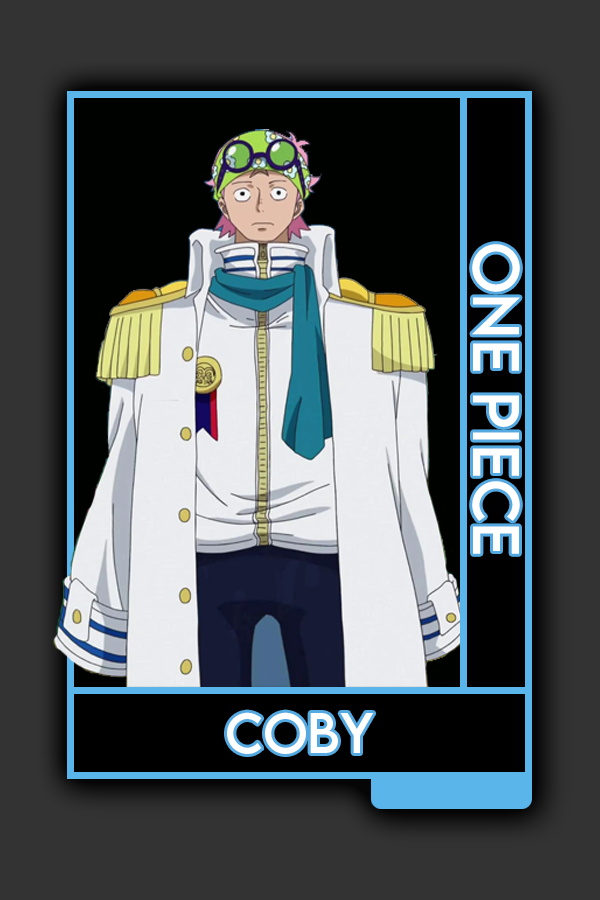
<style>
.page{position:relative;width:600px;height:900px;background:#333333}
.page>*{position:absolute;margin:0}
.t1{font:58.4px "LEMONMILK-Regular";color:#ffffff}
.t2{font:50.5px "LEMONMILK-Regular";color:#ffffff}
</style>
<div class="page">
<p class="t1" style="left:472px;top:244px;width:48px;height:310px;rotate:90deg">One Piece</p>
<p class="t2" style="left:227px;top:712px;width:147px;height:42px">Coby</p>
</div>
